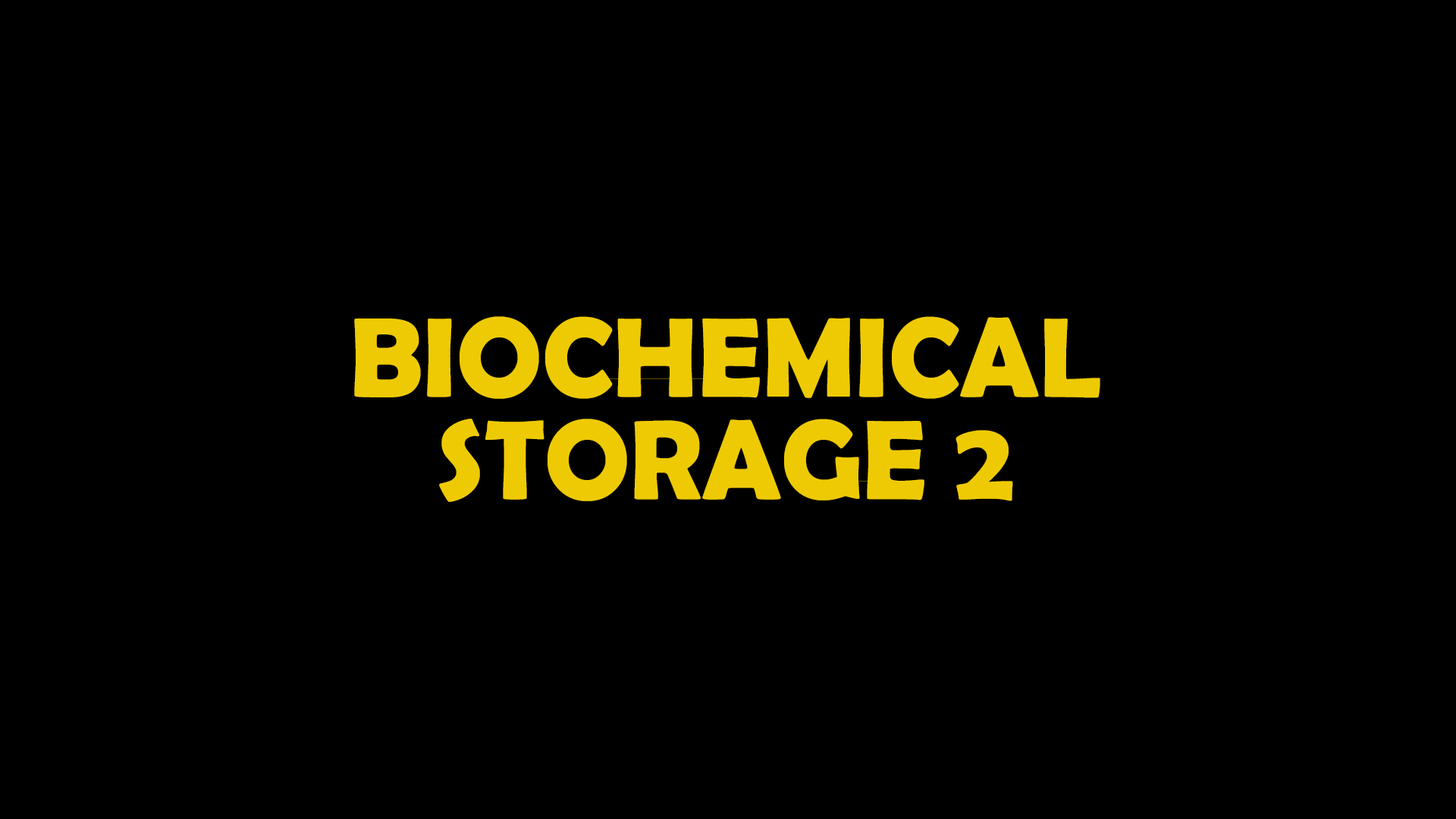
<style>
.page{position:relative;width:1456px;height:819px;background:#000000}
.page>*{position:absolute;margin:0}
.t1{font:113.7px/102.4px "BerlinSansFBDemi-Bold";color:#eeca04}
</style>
<div class="page">
<p class="t1" style="left:354px;top:316px;width:746px;height:186px;text-align:center">BIOCHEMICAL<br>STORAGE 2</p>
</div>
